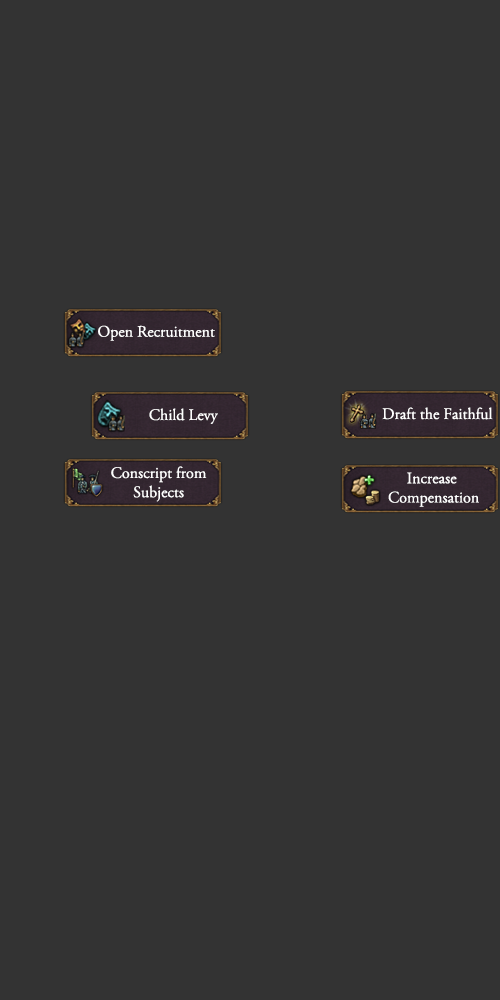
<style>
.page{position:relative;width:500px;height:1000px;background:#333333}
.page>*{position:absolute;margin:0}
.t1{font:16px "AGaramondPro-Regular";color:#ffffff}
</style>
<div class="page">
<p class="t1" style="left:98px;top:325px;width:117px;height:16px">Open Recruitment</p>
<p class="t1" style="left:149px;top:408px;width:69px;height:16px">Child Levy</p>
<p class="t1" style="left:382px;top:407px;width:111px;height:13px">Draft the Faithful</p>
<p class="t1" style="left:111px;top:466px;width:96px;height:36px;text-align:center">Conscript from<br>Subjects</p>
<p class="t1" style="left:388px;top:472px;width:91px;height:35px;text-align:center">Increase <br>Compensation</p>
</div>
